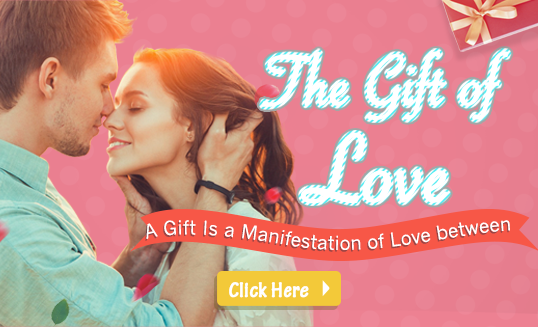
<style>
.page{position:relative;width:538px;height:327px}
.page>*{position:absolute;margin:0}
.t1{font:74.8px "SavoyeLetPlain";color:#ffffff;font-weight:bold}
.t2{font:101.3px "SavoyeLetPlain";color:#ffffff;font-weight:bold}
.t3{font:18.9px "NewsGothicMT"}
.t4{font:18.9px "NewsGothicMT";color:#ffffff}
.t5{font:22.9px "TektonPro-BoldCond";color:#ffffff;font-weight:bold}
</style>
<div class="page">
<p class="t1" style="left:261px;top:51px;width:248px;height:69px">The Gift of</p>
<p class="t2" style="left:301px;top:132px;width:147px;height:72px">Love</p>
<p class="t3" style="left:145px;top:221px;width:364px;height:31px">A Gift Is a Manifestation of Love between Lovers</p>
<p class="t4" style="left:146px;top:220px;width:364px;height:30px">A Gift Is a Manifestation of Love between Lovers</p>
<p class="t5" style="left:229px;top:282px;width:80px;height:16px">Click Here</p>
</div>
